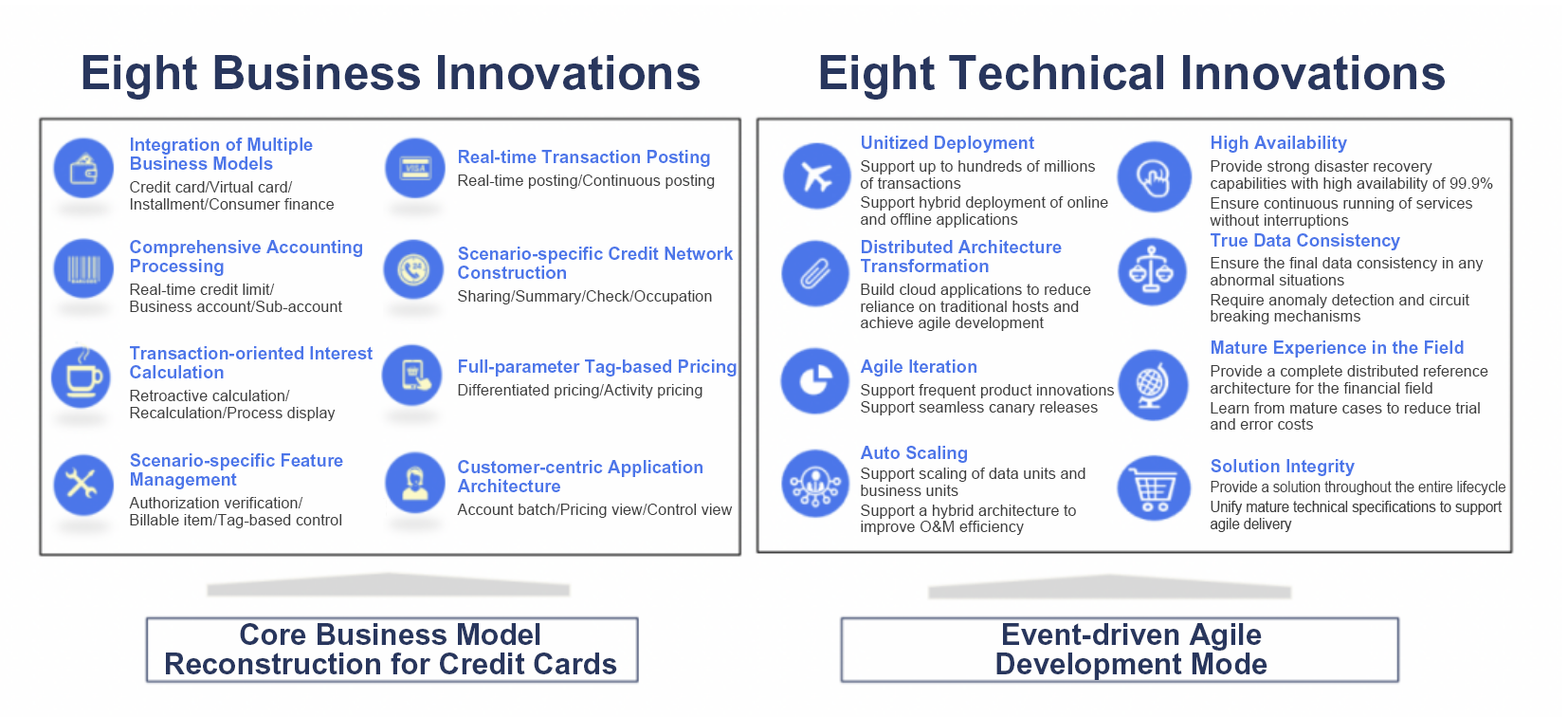
<style>
.page{position:relative;width:1568px;height:717px;background:#fefefe}
.page>*{position:absolute;margin:0}
.t1{font:47.4px "Arial-BoldMT";color:#28365d}
.t2{font:17.6px/19px "Arial-BoldMT";color:#4c76e9}
.t3{font:17.6px "Arial-BoldMT";color:#4c76e9}
.t4{font:15.5px/16.7px "ArialMT";color:#3e3e3e}
.t5{font:15.5px/19.2px "ArialMT";color:#3e3e3e}
.t6{font:15.5px/17.3px "ArialMT";color:#3e3e3e}
.t7{font:15.5px/19.8px "ArialMT";color:#3e3e3e}
.t8{font:15.5px "ArialMT";color:#3e3e3e}
.t9{font:15.5px/16.7px "ArialMT";color:#3e3e3e;scale:0.9 1}
.t10{font:15.5px/16.7px "ArialMT";letter-spacing:-0.02em;color:#3e3e3e;scale:0.94 1}
.t11{font:15.5px/19.8px "ArialMT";letter-spacing:-0.02em;color:#3e3e3e;scale:0.94 1}
.t12{font:29.8px/29.2px "Arial-BoldMT";color:#28365d}
</style>
<div class="page">
<p class="t1" style="left:82px;top:55px;width:618px;height:45px">Eight Business Innovations</p>
<p class="t1" style="left:820px;top:55px;width:625px;height:45px">Eight Technical Innovations</p>
<p class="t2" style="left:131px;top:137px;width:182px;height:33px">Integration of Multiple<br>Business Models</p>
<p class="t3" style="left:862px;top:136px;width:172px;height:17px">Unitized Deployment</p>
<p class="t3" style="left:1212px;top:136px;width:135px;height:17px">High Availability</p>
<p class="t3" style="left:459px;top:150px;width:251px;height:17px">Real-time Transaction Posting</p>
<p class="t4" style="left:860px;top:160px;width:248px;height:68px">Support up to hundreds of millions<br>of <span class="t5">transactions<br></span>Support hybrid deployment of online<br>and offline applications</p>
<p class="t6" style="left:1210px;top:160px;width:283px;height:68px">Provide strong disaster recovery<br>capabilities with high availability of <span class="t7">99.9%<br></span><span class="t4">Ensure continuous running of services<br>without interruptions</span></p>
<p class="t4" style="left:130px;top:181px;width:205px;height:29px">Credit card/Virtual card/<br>Installment/Consumer finance</p>
<p class="t8" style="left:458px;top:174px;width:257px;height:15px">Real-time posting/Continuous posting</p>
<p class="t3" style="left:1211px;top:233px;width:189px;height:17px">True Data Consistency</p>
<p class="t2" style="left:130px;top:240px;width:232px;height:36px">Comprehensive Accounting<br>Processing</p>
<p class="t2" style="left:861px;top:240px;width:201px;height:32px">Distributed Architecture<br>Transformation</p>
<p class="t2" style="left:458px;top:246px;width:276px;height:33px">Scenario-specific Credit Network<br>Construction</p>
<p class="t4" style="left:1211px;top:257px;width:273px;height:67px">Ensure the final data consistency in any<br>abnormal <span class="t7">situations<br></span>Require anomaly detection and circuit<br>breaking mechanisms</p>
<p class="t4" style="left:130px;top:283px;width:212px;height:29px">Real-time credit limit/<br>Business account/Sub-account</p>
<p class="t8" style="left:458px;top:290px;width:254px;height:14px">Sharing/Summary/Check/Occupation</p>
<p class="t4" style="left:861px;top:283px;width:230px;height:48px">Build cloud applications to reduce<br>reliance on traditional hosts and<br>achieve agile development</p>
<p class="t3" style="left:1212px;top:340px;width:252px;height:17px">Mature Experience in the Field</p>
<p class="t2" style="left:130px;top:346px;width:243px;height:32px">Transaction-oriented Interest<br>Calculation</p>
<p class="t3" style="left:459px;top:359px;width:278px;height:17px">Full-parameter Tag-based Pricing</p>
<p class="t3" style="left:860px;top:359px;width:116px;height:17px">Agile Iteration</p>
<p class="t4" style="left:1211px;top:365px;width:277px;height:64px">Provide a complete distributed reference<br>architecture for the financial <span class="t7">field<br></span>Learn from mature cases to reduce trial<br>and error costs</p>
<p class="t4" style="left:130px;top:390px;width:206px;height:31px">Retroactive calculation/<br>Recalculation/Process display</p>
<p class="t8" style="left:458px;top:384px;width:244px;height:14px">Differentiated pricing/Activity pricing</p>
<p class="t4" style="left:861px;top:384px;width:253px;height:31px">Support frequent product innovations<br>Support seamless canary releases</p>
<p class="t3" style="left:860px;top:446px;width:107px;height:17px">Auto Scaling</p>
<p class="t2" style="left:130px;top:453px;width:213px;height:36px">Scenario-specific Feature<br>Management</p>
<p class="t2" style="left:457px;top:460px;width:245px;height:32px">Customer-centric Application<br>Architecture</p>
<p class="t3" style="left:1211px;top:459px;width:144px;height:17px">Solution Integrity</p>
<p class="t4" style="left:861px;top:467px;width:224px;height:68px">Support scaling of data units and<br>business <span class="t7">units<br></span>Support a hybrid architecture to<br>improve O&amp;M efficiency</p>
<p class="t9" style="left:1211px;top:481px;width:294px;height:51px"><span class="t10">Provide a solution throughout the entire </span><span class="t11">lifecycle<br></span>Unify mature technical specifications to support<br>agile delivery</p>
<p class="t4" style="left:129px;top:497px;width:213px;height:31px">Authorization verification/<br>Billable item/Tag-based control</p>
<p class="t8" style="left:457px;top:503px;width:276px;height:15px">Account batch/Pricing view/Control view</p>
<p class="t12" style="left:166px;top:623px;width:451px;height:51px;text-align:center">Core Business Model<br>Reconstruction for Credit Cards</p>
<p class="t12" style="left:996px;top:623px;width:271px;height:57px;text-align:center">Event-driven Agile<br>Development Mode</p>
</div>
